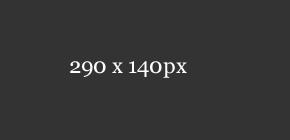
<style>
.page{position:relative;width:290px;height:140px;background:#333333}
.page>*{position:absolute;margin:0}
.t1{font:22px "Georgia";color:#ffffff}
</style>
<div class="page">
<p class="t1" style="left:70px;top:61px;width:117px;height:17px">290 x 140px</p>
</div>
